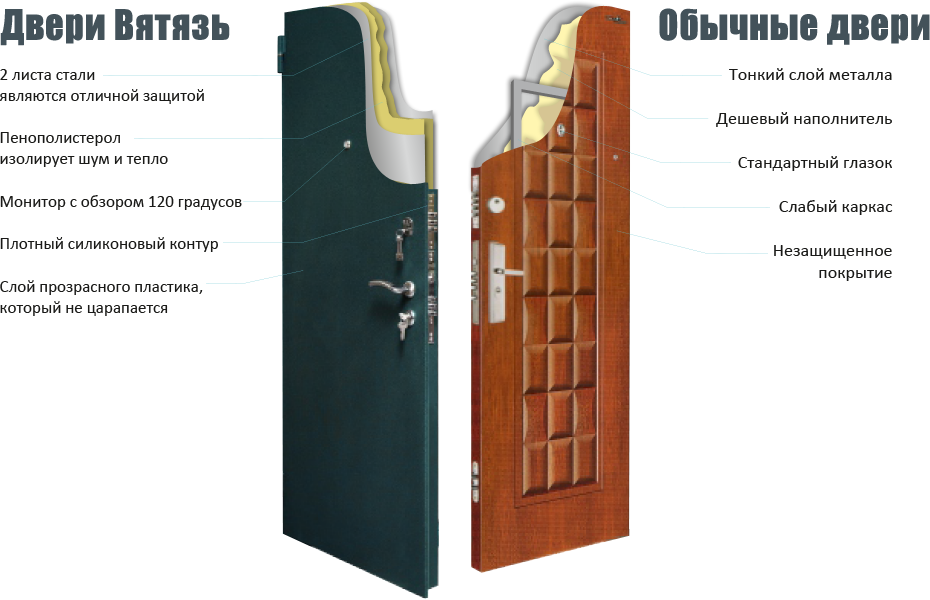
<style>
.page{position:relative;width:930px;height:600px;background:#ffffff}
.page>*{position:absolute;margin:0}
.t1{font:38.6px "Impact";color:#43525a;font-weight:bold;scale:0.95 1}
.t2{font:17px/21.2px "Calibri";color:#1a1a18}
.t3{font:18px/22px "Calibri";color:#1a1a18}
</style>
<div class="page">
<p class="t1" style="left:0px;top:9px;width:230px;height:37px">Двери Вятязь</p>
<p class="t1" style="left:659px;top:8px;width:271px;height:37px">Обычные двери</p>
<p class="t2" style="left:0px;top:69px;width:242px;height:247px">2 листа стали<br>являются отличной защитой<br><br>Пенополистерол<br>изолирует шум и тепло<br><br>Монитор с обзором 120 градусов<br><br>Плотный силиконовый контур<br><br>Слой прозрасного пластика,<br>который не царапается</p>
<p class="t3" style="left:716px;top:68px;width:177px;height:213px;text-align:right">Тонкий слой металла<br><br>Дешевый наполнитель<br><br>Стандартный глазок<br><br>Слабый каркас<br><br>Незащищенное<br>покрытие</p>
</div>
